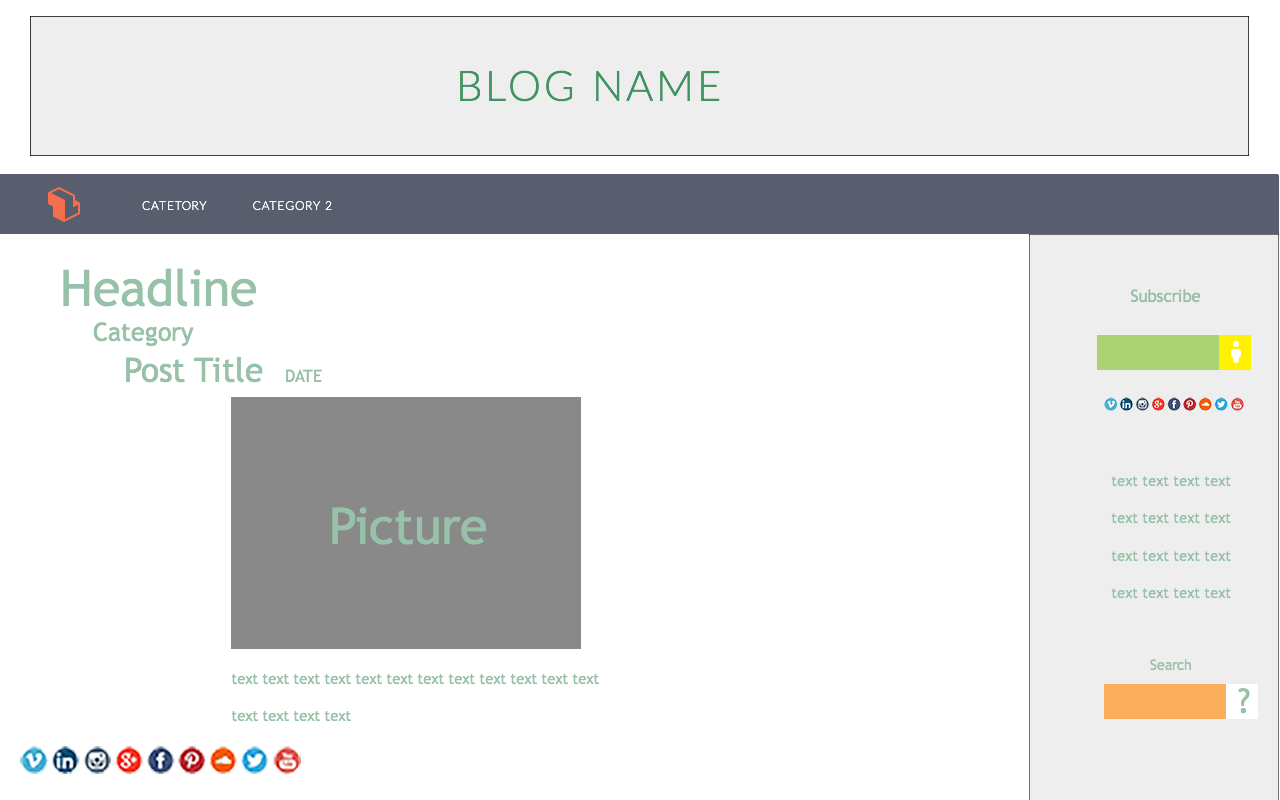
<style>
.page{position:relative;width:1280px;height:800px;background:#ffffff}
.page>*{position:absolute;margin:0}
.t1{font:41.7px "Lato-Light";letter-spacing:0.075em;color:#3e9562;text-transform:uppercase}
.t2{font:12px "Lato-Light";letter-spacing:0.075em;color:#ffffff;text-transform:uppercase}
.t3{font:50px "TrebuchetMS";color:#97c2a9}
.t4{font:16.7px "TrebuchetMS";color:#97c2a9}
.t5{font:25px "TrebuchetMS";color:#97c2a9}
.t6{font:33.3px "TrebuchetMS";color:#97c2a9}
.t7{font:14px/37.5px "TrebuchetMS";color:#97c2a9}
.t8{font:14px "TrebuchetMS";color:#97c2a9}
.t9{font:14.6px/37.5px "TrebuchetMS";color:#97c2a9}
</style>
<div class="page">
<p class="t1" style="left:460px;top:70px;width:260px;height:32px">BLOG NAME</p>
<p class="t2" style="left:142px;top:201px;width:65px;height:10px">CATETORY</p>
<p class="t2" style="left:253px;top:201px;width:79px;height:10px">CATEGORY 2</p>
<p class="t3" style="left:63px;top:268px;width:193px;height:39px">Headline</p>
<p class="t4" style="left:1130px;top:289px;width:71px;height:14px">Subscribe</p>
<p class="t5" style="left:93px;top:322px;width:101px;height:25px">Category</p>
<p class="t6" style="left:126px;top:356px;width:137px;height:27px">Post Title</p>
<p class="t4" style="left:286px;top:369px;width:36px;height:13px">DATE</p>
<p class="t7" style="left:1111px;top:476px;width:120px;height:123px">text text text text<br>text text text text <br>text text text text<br>text text text text</p>
<p class="t3" style="left:332px;top:507px;width:154px;height:38px">Picture</p>
<p class="t8" style="left:1150px;top:659px;width:41px;height:12px">Search</p>
<p class="t9" style="left:231px;top:674px;width:368px;height:48px">text text text text text text text text text text text text<br>text text text text</p>
<p class="t6" style="left:1238px;top:688px;width:12px;height:26px">?</p>
</div>
